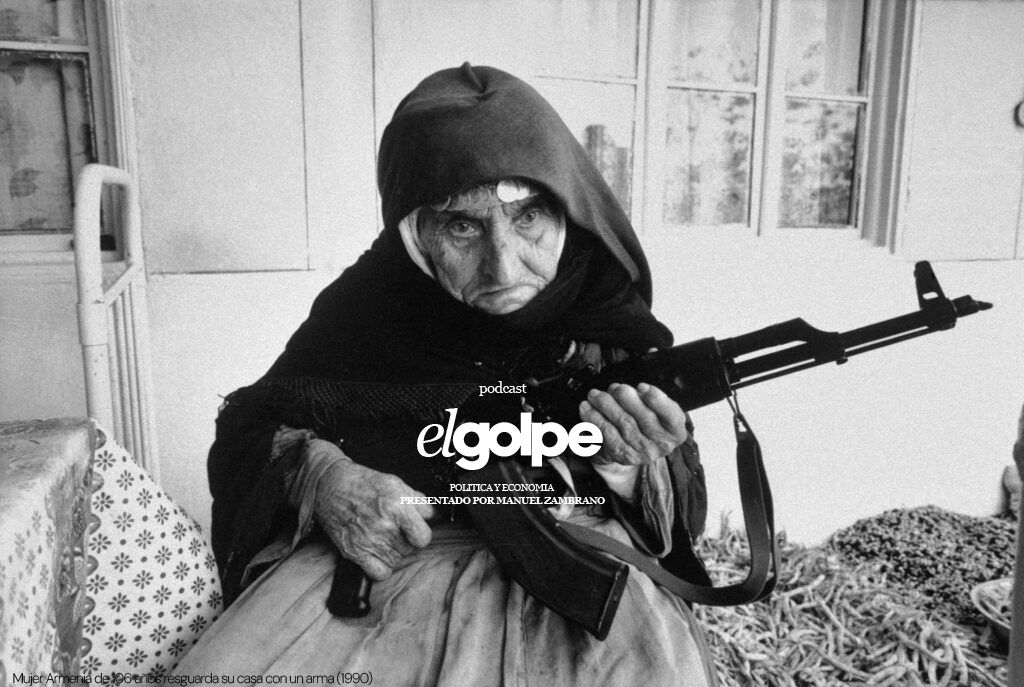
<style>
.page{position:relative;width:1024px;height:687px}
.page>*{position:absolute;margin:0}
.t1{font:15.3px "Georgia";letter-spacing:-0.05em;color:#ffffff}
.t2{font:62.1px "NewakeDemo";letter-spacing:-0.05em;color:#ffffff}
.t3{font:63.9px "Georgia-Italic";letter-spacing:-0.1em;color:#ffffff}
.t4{font:10px/12.8px "Georgia-Bold";letter-spacing:-0.05em;color:#ffffff}
.t5{font:10px/12.8px "Georgia";letter-spacing:-0.05em;color:#ffffff}
.t6{font:14px "DMSans-ExtraLight";letter-spacing:-0.05em;color:#000000}
.t7{font:18px "DMSans-Thin";letter-spacing:-0.05em;color:#ffffff}
</style>
<div class="page">
<p class="t1" style="left:479px;top:381px;width:48px;height:15px">podcast</p>
<p class="t2" style="left:417px;top:408px;width:186px;height:62px"><span class="t3">el</span>golpe</p>
<p class="t4" style="left:400px;top:484px;width:205px;height:20px;text-align:center"><span class="t5">POLITICA Y ECONOMIA <br></span>PRESENTADO POR MANUEL ZAMBRANO</p>
<p class="t6" style="left:13px;top:671px;width:360px;height:16px"><span class="t7"><br></span>Mujer Armenia de 106 años resguarda su casa con un arma (1990)</p>
</div>
